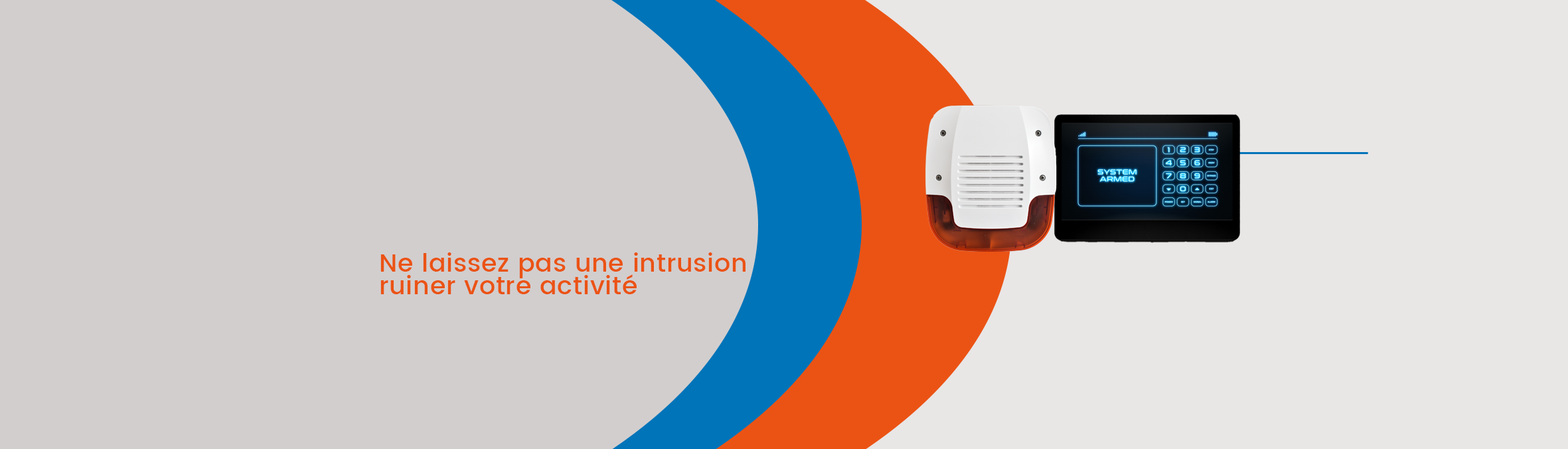
<style>
.page{position:relative;width:1568px;height:449px;background:#d2cece}
.page>*{position:absolute;margin:0}
.t1{font:24.9px/22.1px "Poppins-Medium";letter-spacing:0.025em;color:#eb5314}
</style>
<div class="page">
<p class="t1" style="left:380px;top:252px;width:365px;height:42px">Ne laissez pas une intrusion<br>ruiner votre activité</p>
</div>
